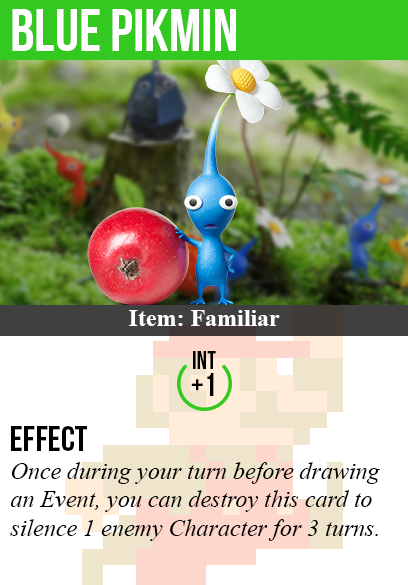
<style>
.page{position:relative;width:408px;height:585px;background:#ffffff}
.page>*{position:absolute;margin:0}
.t1{font:60px "BebasNeue";color:#ffffff}
.t2{font:24px "TimesNewRomanPS-BoldMT";color:#ffffff}
.t3{font:25px "BebasNeue";color:#000000}
.t4{font:32px "BebasNeue";color:#000000}
.t5{font:36px "BebasNeue";color:#000000}
.t6{font:24px "TimesNewRomanPS-ItalicMT";color:#000000}
</style>
<div class="page">
<p class="t1" style="left:12px;top:9px;width:224px;height:42px">blue pikmin</p>
<p class="t2" style="left:129px;top:310px;width:151px;height:16px">Item: Familiar</p>
<p class="t3" style="left:193px;top:351px;width:23px;height:18px">int</p>
<p class="t4" style="left:191px;top:373px;width:23px;height:23px">+1</p>
<p class="t5" style="left:11px;top:426px;width:76px;height:25px">Effect</p>
<p class="t6" style="left:10px;top:462px;width:370px;height:79px">Once during your turn before drawing<br>an Event, you can destroy this card to<br>silence 1 enemy Character for 3 turns.</p>
</div>
